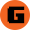
<style>
.page{position:relative;width:30px;height:30px;background:#f26522}
.page>*{position:absolute;margin:0}
.t1{font:20px "8BITWONDERNominal";color:#000000}
</style>
<div class="page">
<p class="t1" style="left:7px;top:6px;width:18px;height:18px">G</p>
</div>
